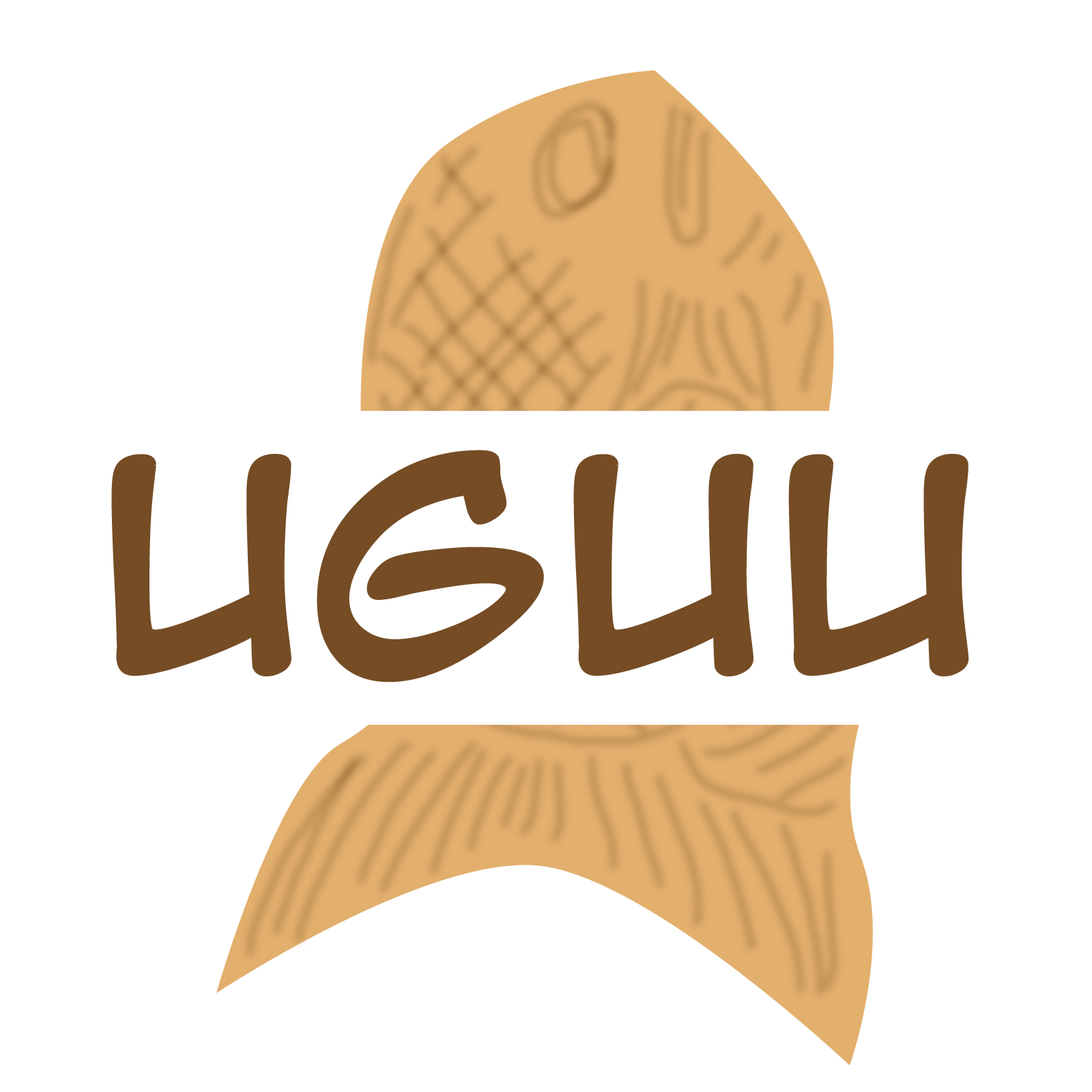
<style>
.page{position:relative;width:1092px;height:1092px;background:#ffffff}
.page>*{position:absolute;margin:0}
.t1{font:268.2px "AnimeAce2.0BB";color:#754c24;font-weight:bold}
</style>
<div class="page">
<p class="t1" style="left:111px;top:450px;width:858px;height:232px">Uguu</p>
</div>
